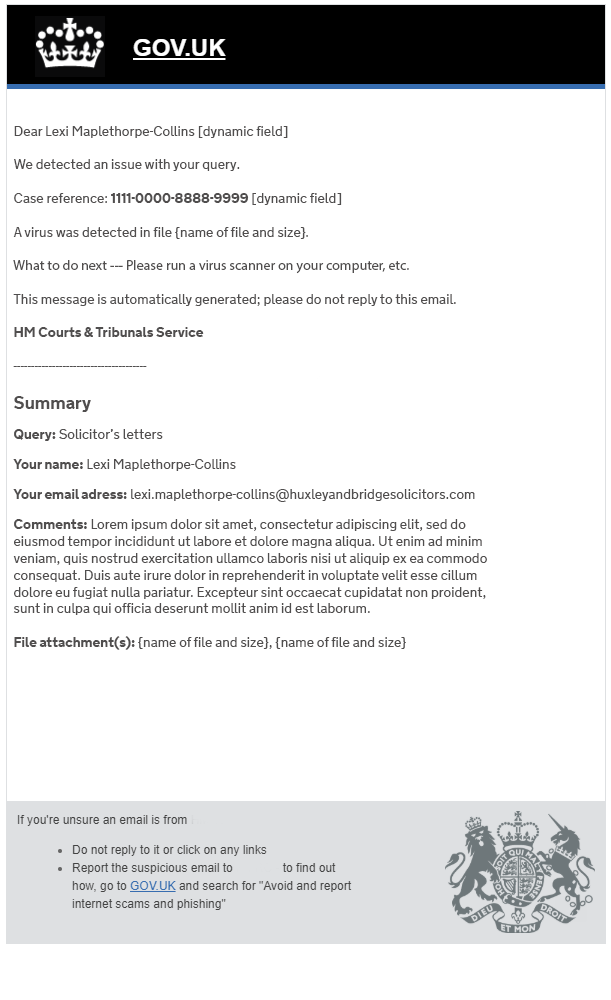
<style>
.page{position:relative;width:611px;height:1000px;background:#ffffff}
.page>*{position:absolute;margin:0}
.t1{font:14px "GDSTransportWebsite";color:#504e4e}
.t2{font:14px "GDSTransportWebsite-Bold";color:#504e4e}
.t3{font:14px "MyriadPro-Regular";color:#504e4e}
.t4{font:18px "GDSTransportWebsite-Bold";color:#504e4e}
.t5{font:14px/30px "GDSTransportWebsite-Bold";color:#504e4e}
.t6{font:14px/30px "GDSTransportWebsite";color:#504e4e}
</style>
<div class="page">
<p class="t1" style="left:13px;top:126px;width:474px;height:524px">Dear Lexi Maplethorpe-Collins [dynamic field]<br><br>We detected an issue with your query.<br><br>Case reference: <span class="t2">1111-0000-8888-9999</span> [dynamic field] <br><br>A virus was detected in file {name of file and size}<span class="t3">.<br><br>What to do next --- Please run a virus scanner on your computer, etc.<br></span><br>This message is automatically generated; please do not reply to this email.<br><br><span class="t2">HM Courts &amp; Tribunals Service<br></span><br>--------------------------------------<br><br><span class="t4">Summary<br></span><span class="t5">Query:</span><span class="t6"> Solicitor’s letters<br></span><span class="t5">Your name:</span><span class="t6"> Lexi Maplethorpe-Collins<br></span><span class="t5">Your email adress:</span><span class="t6"> lexi.maplethorpe-collins@huxleyandbridgesolicitors.com<br></span><span class="t5">Comments: </span>Lorem ipsum dolor sit amet, consectetur adipiscing elit, sed do eiusmod tempor incididunt ut labore et dolore magna aliqua. Ut enim ad minim veniam, quis nostrud exercitation ullamco laboris nisi ut aliquip ex ea commodo consequat. Duis aute irure dolor in reprehenderit in voluptate velit esse cillum dolore eu fugiat nulla pariatur. Excepteur sint occaecat cupidatat non proident, sunt in culpa qui officia deserunt mollit anim id est laborum.<br><br><span class="t2">File attachment(s): </span>{name of file and size}, {name of file and size}</p>
</div>
